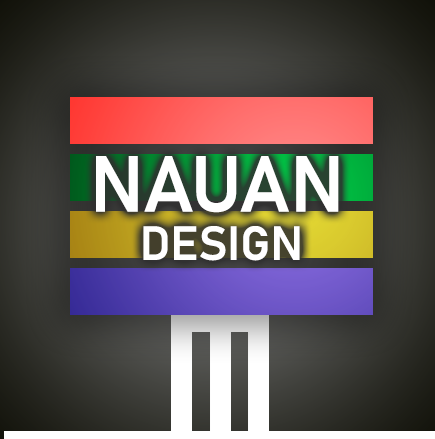
<style>
.page{position:relative;width:435px;height:439px}
.page>*{position:absolute;margin:0}
.t1{font:77.9px "Bahnschrift-SemiBold";color:#ffffff}
.t2{font:47.3px "Bahnschrift-SemiBold";color:#ffffff}
</style>
<div class="page">
<p class="t1" style="left:96px;top:156px;width:243px;height:57px">NAUAN</p>
<p class="t2" style="left:143px;top:226px;width:157px;height:35px">DESIGN</p>
</div>
